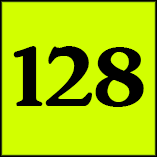
<style>
.page{position:relative;width:157px;height:157px;background:#d2ff00}
.page>*{position:absolute;margin:0}
.t1{font:92px "ARJULIAN";color:#000000}
</style>
<div class="page">
<p class="t1" style="left:13px;top:46px;width:131px;height:61px">128</p>
</div>
